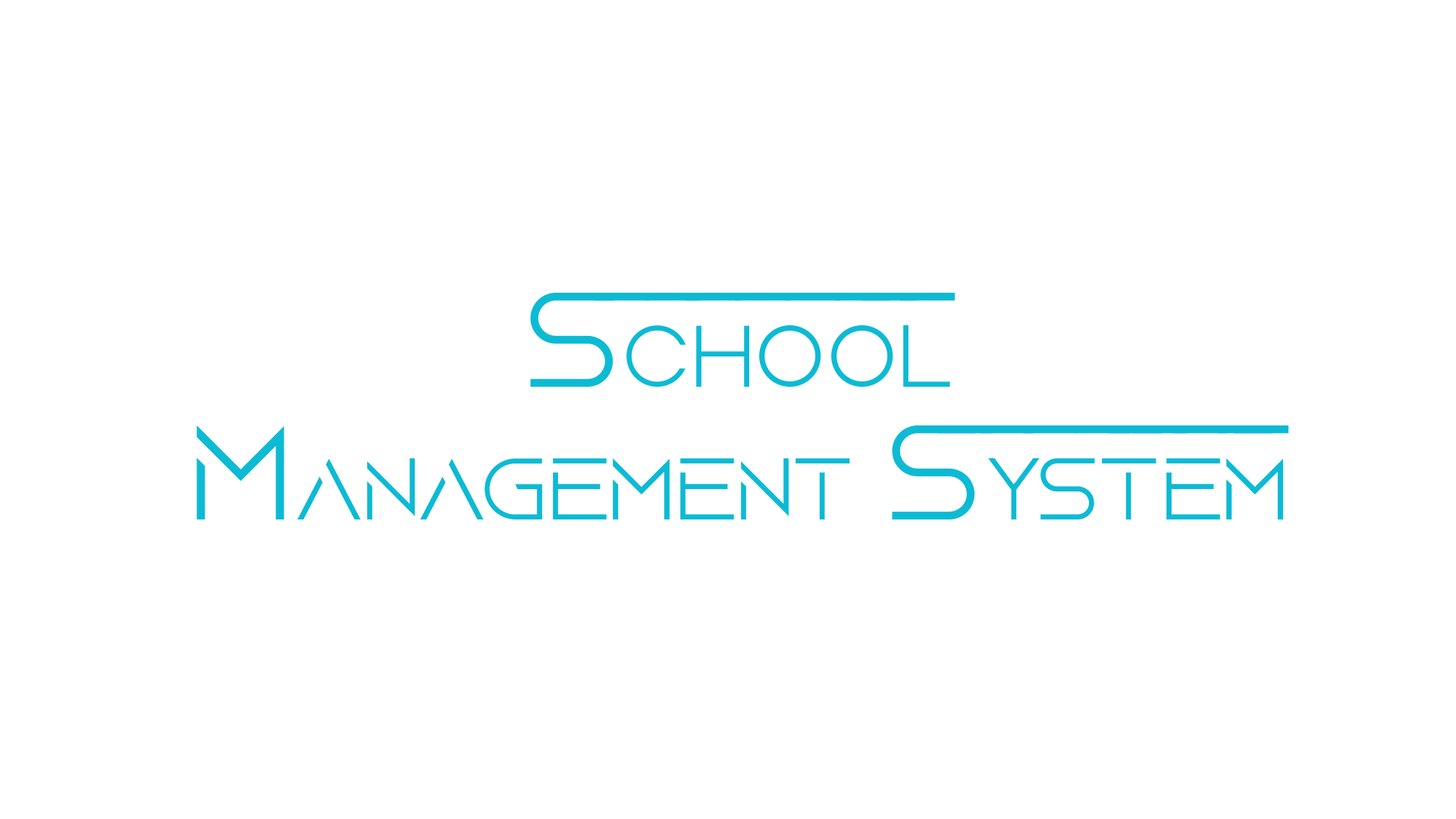
<style>
.page{position:relative;width:1456px;height:819px;background:#ffffff}
.page>*{position:absolute;margin:0}
.t1{font:98.6px/132.7px "AquireLight";letter-spacing:0.01em;color:#0dbad4}
.t2{font:151.7px/132.7px "AquireLight";letter-spacing:0.01em;color:#0dbad4}
</style>
<div class="page">
<p class="t1" style="left:196px;top:293px;width:1087px;height:226px;text-align:center"><span class="t2">S</span>chool<br><span class="t2">M</span>anagement <span class="t2">S</span>ystem</p>
</div>
